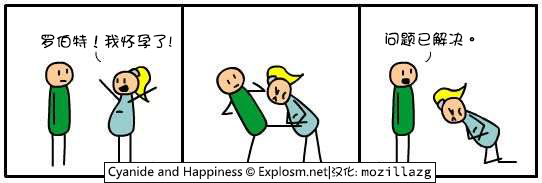
<style>
.page{position:relative;width:542px;height:183px;background:#ffffff}
.page>*{position:absolute;margin:0}
.t1{font:16px "DFGirl";color:#000000}
</style>
<div class="page">
<p class="t1" style="left:41px;top:34px;width:131px;height:15px">罗伯特！我怀孕了!</p>
<p class="t1" style="left:385px;top:32px;width:90px;height:15px">问题已解决。</p>
</div>
